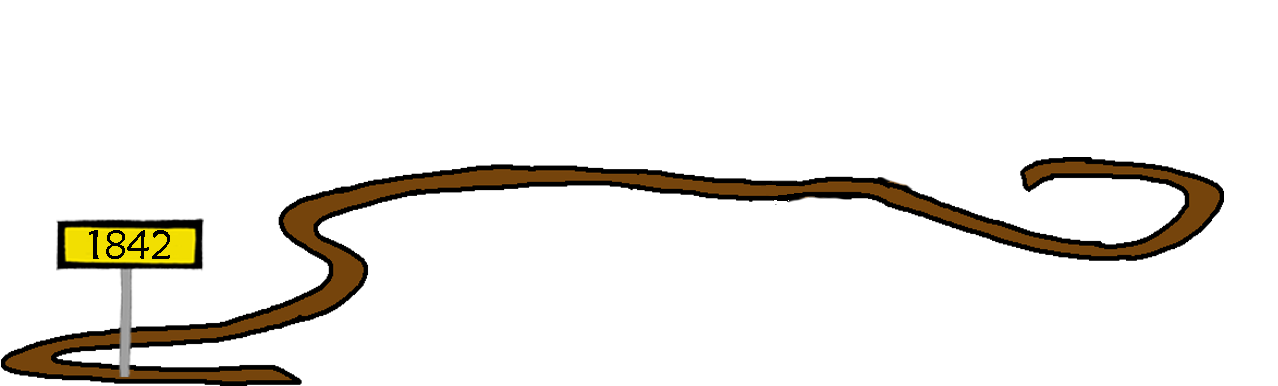
<style>
.page{position:relative;width:1278px;height:386px;background:#ffffff}
.page>*{position:absolute;margin:0}
.t1{font:41.7px "MaiandraGD-Regular";color:#000000}
</style>
<div class="page">
<p class="t1" style="left:89px;top:230px;width:81px;height:29px">1842</p>
</div>
